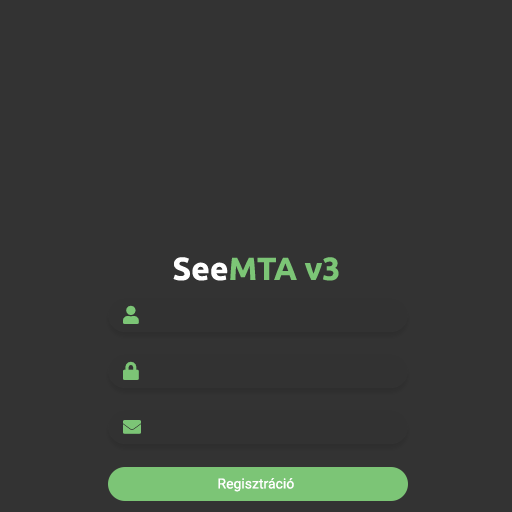
<style>
.page{position:relative;width:512px;height:512px;background:#333333}
.page>*{position:absolute;margin:0}
.t1{font:32px "Ubuntu-Bold";color:#7cc576}
.t2{font:32px "Ubuntu-Bold";color:#ffffff}
.t3{font:14px "Roboto-Regular";color:#ffffff}
</style>
<div class="page">
<p class="t1" style="left:173px;top:257px;width:166px;height:24px"><span class="t2">See</span>MTA v3</p>
<p class="t3" style="left:218px;top:478px;width:76px;height:14px">Regisztráció</p>
</div>
